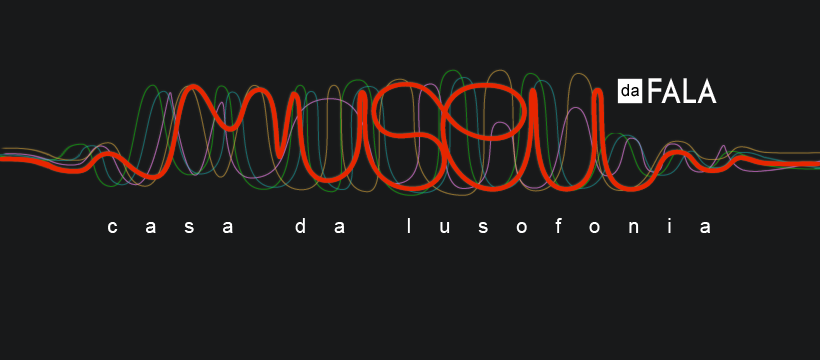
<style>
.page{position:relative;width:820px;height:360px;background:#18191a}
.page>*{position:absolute;margin:0}
.t1{font:35.4px "Cassannet-Regular";letter-spacing:0.01em;color:#fffefe;scale:0.91 1}
.t2{font:16.8px "ArialMT";letter-spacing:0.01em;color:#000000}
.t3{font:20px "ArialMT";letter-spacing:1.4em;color:#fefefe}
</style>
<div class="page">
<p class="t1" style="left:648px;top:77px;width:69px;height:26px">FALA</p>
<p class="t2" style="left:621px;top:84px;width:18px;height:13px">da</p>
<p class="t3" style="left:108px;top:218px;width:602px;height:15px">casa da lusofonia</p>
</div>
